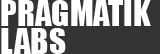
<style>
.page{position:relative;width:160px;height:54px;background:#333333}
.page>*{position:absolute;margin:0}
.t1{font:33px/28px "Impact";color:#ffffff}
</style>
<div class="page">
<p class="t1" style="left:1px;top:0px;width:150px;height:54px">PRAGMATIK<br>LABS</p>
</div>
